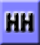
<style>
.page{position:relative;width:40px;height:45px;background:#8080ff}
.page>*{position:absolute;margin:0}
.t1{font:24px "GothicXB-HM"}
</style>
<div class="page">
<p class="t1" style="left:6px;top:13px;width:27px;height:18px">HH</p>
</div>
